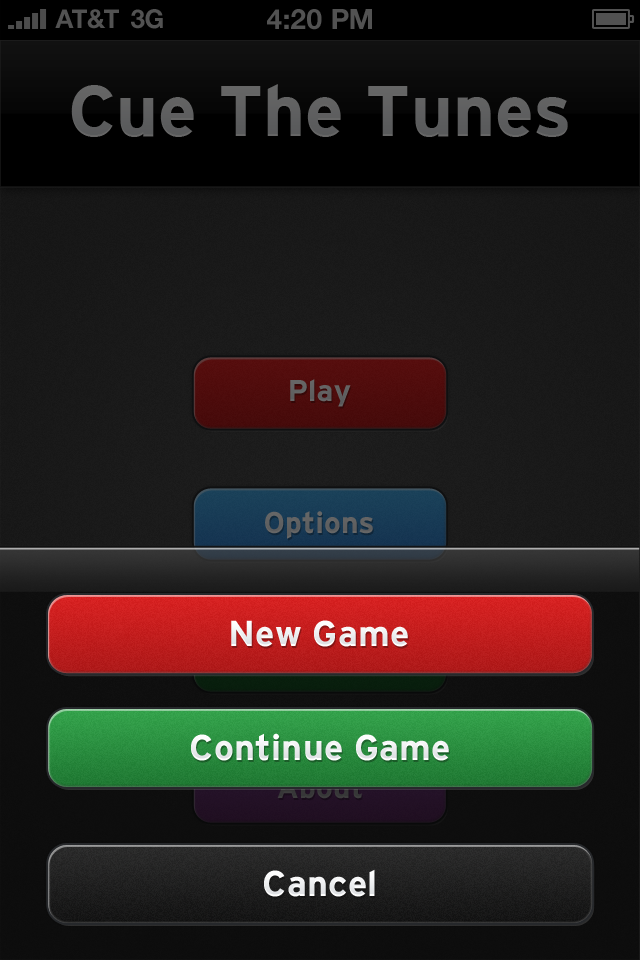
<style>
.page{position:relative;width:640px;height:960px}
.page>*{position:absolute;margin:0}
.t1{font:26px "HelveticaNeue-Bold";color:#525252;text-transform:uppercase}
.t2{font:28px "HelveticaNeue-Bold";color:#525252;text-transform:uppercase}
.t3{font:72px "Interstate-Bold";color:#5f6060}
.t4{font:30px "Interstate-Bold";letter-spacing:0.005em;color:#626263}
.t5{font:30px "Interstate-Bold";letter-spacing:0.005em;color:#616262}
.t6{font:36px "Interstate-Bold";letter-spacing:0.005em;color:#ffffff}
.t7{font:30px "Interstate-Bold";letter-spacing:0.005em}
</style>
<div class="page">
<p class="t1" style="left:55px;top:9px;width:64px;height:20px">AT&amp;T</p>
<p class="t1" style="left:131px;top:9px;width:32px;height:20px">3G</p>
<p class="t2" style="left:267px;top:9px;width:105px;height:21px">4:20 pM</p>
<p class="t3" style="left:71px;top:84px;width:497px;height:53px">Cue The Tunes</p>
<p class="t4" style="left:290px;top:379px;width:61px;height:28px">Play</p>
<p class="t5" style="left:265px;top:511px;width:108px;height:28px">Options</p>
<p class="t6" style="left:231px;top:620px;width:177px;height:27px">New Game</p>
<p class="t6" style="left:191px;top:733px;width:258px;height:28px">Continue Game</p>
<p class="t7" style="left:277px;top:776px;width:85px;height:23px">About</p>
<p class="t6" style="left:264px;top:869px;width:111px;height:28px">Cancel</p>
</div>
